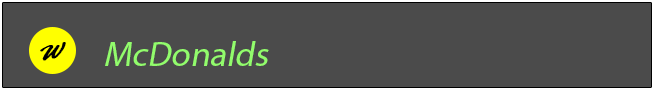
<style>
.page{position:relative;width:654px;height:90px;background:#4b4b4b}
.page>*{position:absolute;margin:0}
.t1{font:60px "MyriadPro-Regular";color:#92fc6c;font-style:italic}
</style>
<div class="page">
<p class="t1" style="left:105px;top:41px;width:164px;height:25px">McDonalds</p>
</div>
